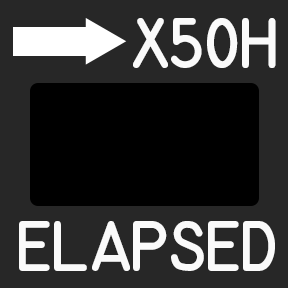
<style>
.page{position:relative;width:288px;height:288px;background:#272727}
.page>*{position:absolute;margin:0}
.t1{font:50px "MS-33558-Regular";letter-spacing:-0.04em;color:#ffffff}
</style>
<div class="page">
<p class="t1" style="left:133px;top:18px;width:143px;height:50px;opacity:0.97">X50H</p>
<p class="t1" style="left:19px;top:221px;width:256px;height:50px;opacity:0.97">ELAPSED</p>
</div>
